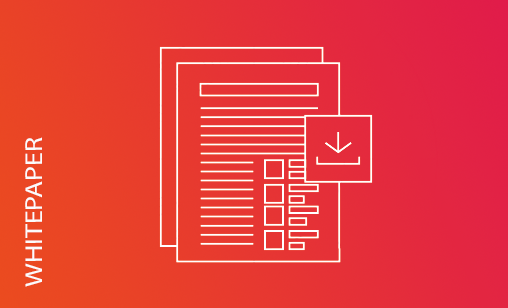
<style>
.page{position:relative;width:508px;height:308px}
.page>*{position:absolute;margin:0}
.t1{font:24.6px "MyriadPro-Regular";color:#fbfbfc;scale:1.14 1}
</style>
<div class="page">
<p class="t1" style="left:25px;top:137px;width:17px;height:150px;rotate:-90deg">WHITEPAPER</p>
</div>
